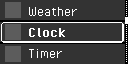
<style>
.page{position:relative;width:128px;height:64px;background:#333333}
.page>*{position:absolute;margin:0}
.t1{font:16px "PixelOperator";color:#ffffff}
.t2{font:16px "PixelOperator-Bold";color:#ffffff}
</style>
<div class="page">
<p class="t1" style="left:29px;top:7px;width:49px;height:9px">Weather</p>
<p class="t2" style="left:29px;top:28px;width:37px;height:9px">Clock</p>
<p class="t1" style="left:29px;top:49px;width:33px;height:9px">Timer</p>
</div>
